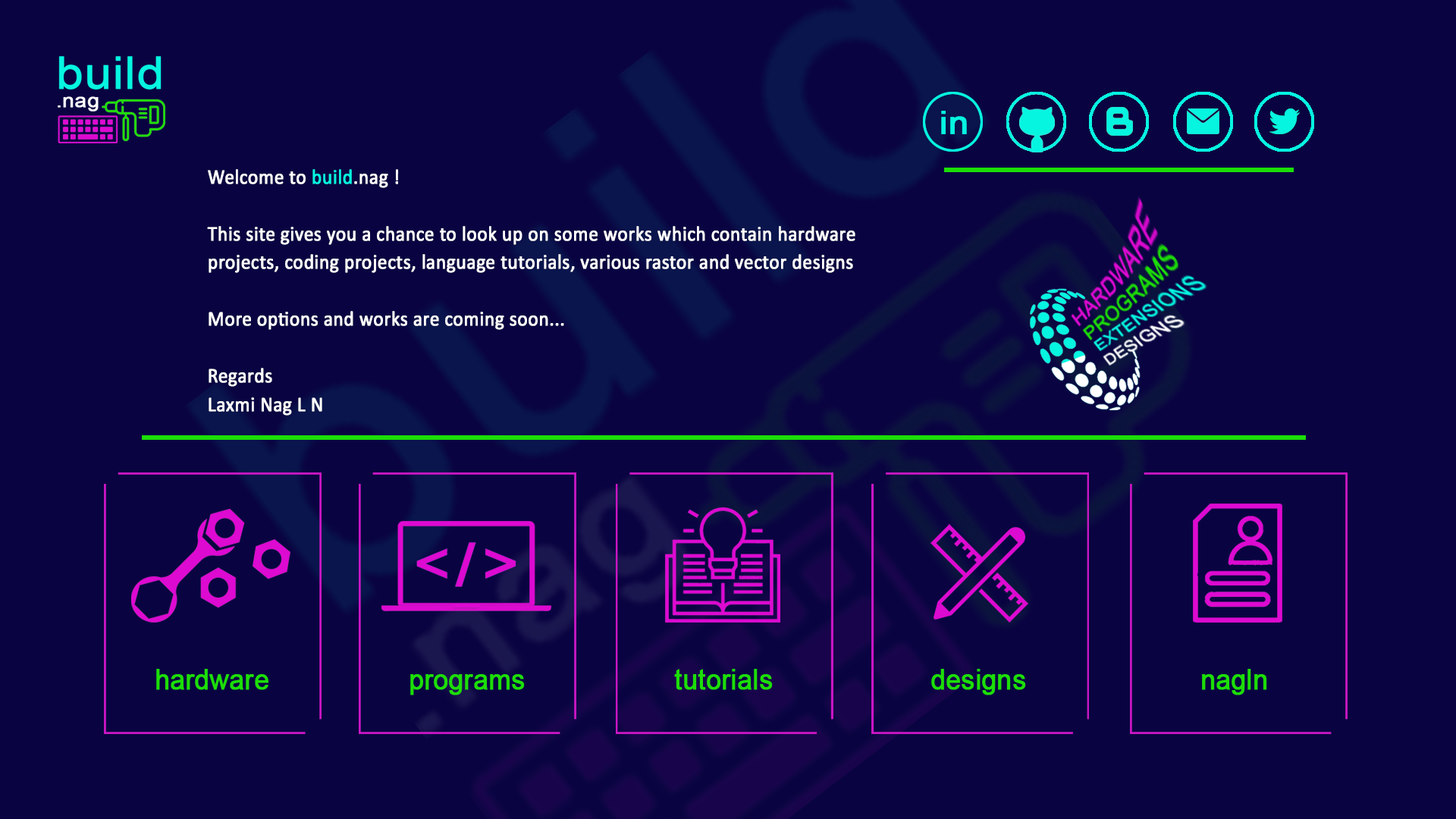
<style>
.page{position:relative;width:1456px;height:819px;background:#090441}
.page>*{position:absolute;margin:0}
.t1{font:20.8px/28.4px "Calibri";color:#ffffff;font-weight:bold;scale:0.92 1}
.t2{font:20.8px/28.4px "Calibri";color:#06f5e1;font-weight:bold;scale:0.92 1}
</style>
<div class="page">
<p class="t1" style="left:207px;top:169px;width:648px;height:247px">Welcome to <span class="t2">build</span>.nag !<br><br>This site gives you a chance to look up on some works which contain hardware <br>projects, coding projects, language tutorials, various rastor and vector designs<br><br>More options and works are coming soon...<br><br>Regards<br>Laxmi Nag L N</p>
</div>
